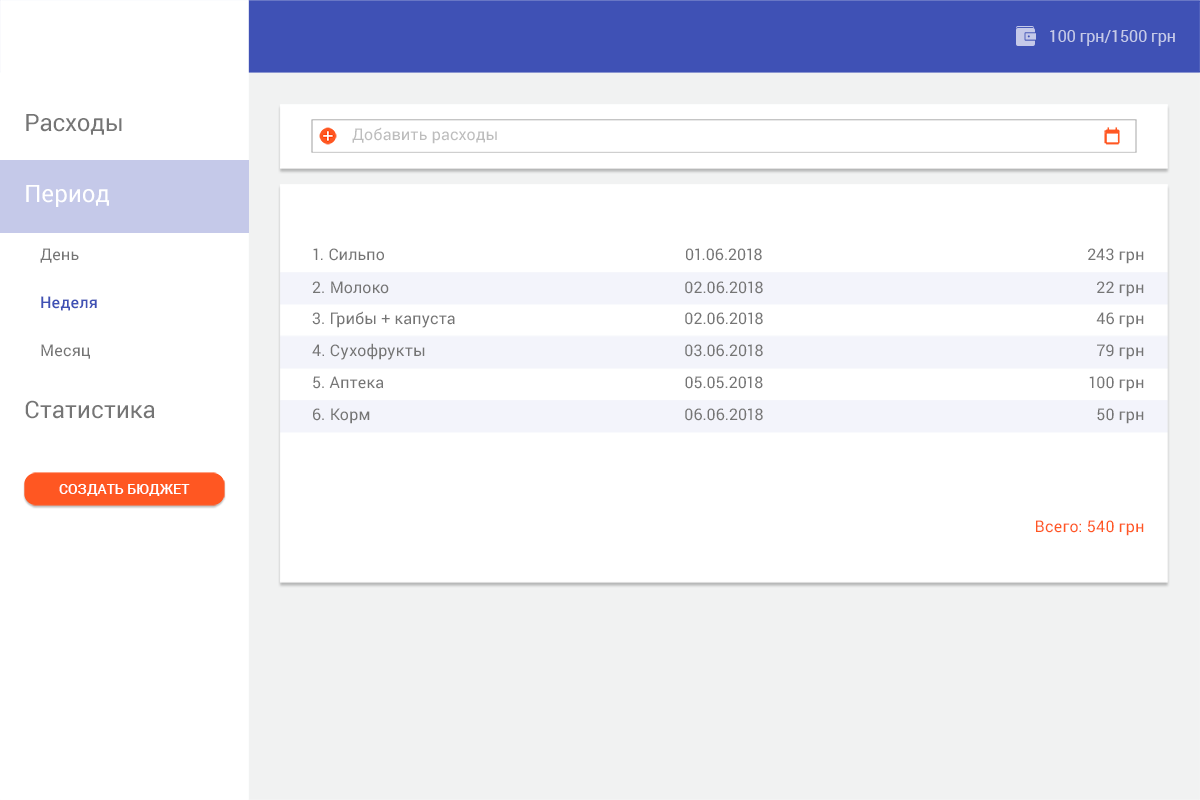
<style>
.page{position:relative;width:1200px;height:800px;background:#ffffff}
.page>*{position:absolute;margin:0}
.t1{font:16px "Roboto-Regular";color:#c5cae9}
.t2{font:24px "Roboto-Regular";color:#757575}
.t3{font:16px "Roboto-Regular";letter-spacing:0.01em;color:#bdbdbd}
.t4{font:24px "Roboto-Regular";color:#ffffff}
.t5{font:16px "Roboto-Regular";letter-spacing:0.01em;color:#757575}
.t6{font:16px "Roboto-Medium";letter-spacing:0.01em;color:#3f51b5}
.t7{font:14px "Roboto-Medium";letter-spacing:0.005em;color:#ffffff;text-transform:uppercase}
.t8{font:16px "Roboto-Regular";letter-spacing:0.01em;color:#ff5722}
</style>
<div class="page">
<p class="t1" style="left:1050px;top:30px;width:125px;height:16px">100 грн/1500 грн</p>
<p class="t2" style="left:26px;top:114px;width:96px;height:21px">Расходы</p>
<p class="t3" style="left:352px;top:127px;width:145px;height:17px">Добавить расходы</p>
<p class="t4" style="left:26px;top:185px;width:84px;height:22px">Период</p>
<p class="t5" style="left:40px;top:248px;width:39px;height:15px">День</p>
<p class="t5" style="left:313px;top:248px;width:71px;height:13px">1. Сильпо</p>
<p class="t5" style="left:686px;top:248px;width:76px;height:13px">01.06.2018</p>
<p class="t5" style="left:1088px;top:248px;width:56px;height:16px">243 грн</p>
<p class="t5" style="left:312px;top:281px;width:77px;height:13px">2. Молоко</p>
<p class="t5" style="left:685px;top:281px;width:78px;height:13px">02.06.2018</p>
<p class="t5" style="left:1097px;top:281px;width:47px;height:16px">22 грн</p>
<p class="t6" style="left:41px;top:296px;width:56px;height:15px">Неделя</p>
<p class="t5" style="left:312px;top:311px;width:143px;height:17px">3. Грибы + капуста</p>
<p class="t5" style="left:685px;top:312px;width:78px;height:13px">02.06.2018</p>
<p class="t5" style="left:1096px;top:312px;width:48px;height:16px">46 грн</p>
<p class="t5" style="left:41px;top:344px;width:49px;height:15px">Месяц</p>
<p class="t5" style="left:312px;top:343px;width:113px;height:17px">4. Сухофрукты</p>
<p class="t5" style="left:685px;top:344px;width:78px;height:13px">03.06.2018</p>
<p class="t5" style="left:1097px;top:344px;width:47px;height:16px">79 грн</p>
<p class="t5" style="left:313px;top:376px;width:71px;height:13px">5. Аптека</p>
<p class="t5" style="left:685px;top:376px;width:78px;height:13px">05.05.2018</p>
<p class="t5" style="left:1089px;top:376px;width:55px;height:16px">100 грн</p>
<p class="t2" style="left:25px;top:400px;width:130px;height:19px">Статистика</p>
<p class="t5" style="left:313px;top:408px;width:57px;height:16px">6. Корм</p>
<p class="t5" style="left:685px;top:408px;width:78px;height:13px">06.06.2018</p>
<p class="t5" style="left:1097px;top:408px;width:47px;height:16px">50 грн</p>
<p class="t7" style="left:59px;top:484px;width:131px;height:12px">создать бюджет</p>
<p class="t8" style="left:1036px;top:520px;width:108px;height:16px">Всего: 540 грн</p>
</div>
